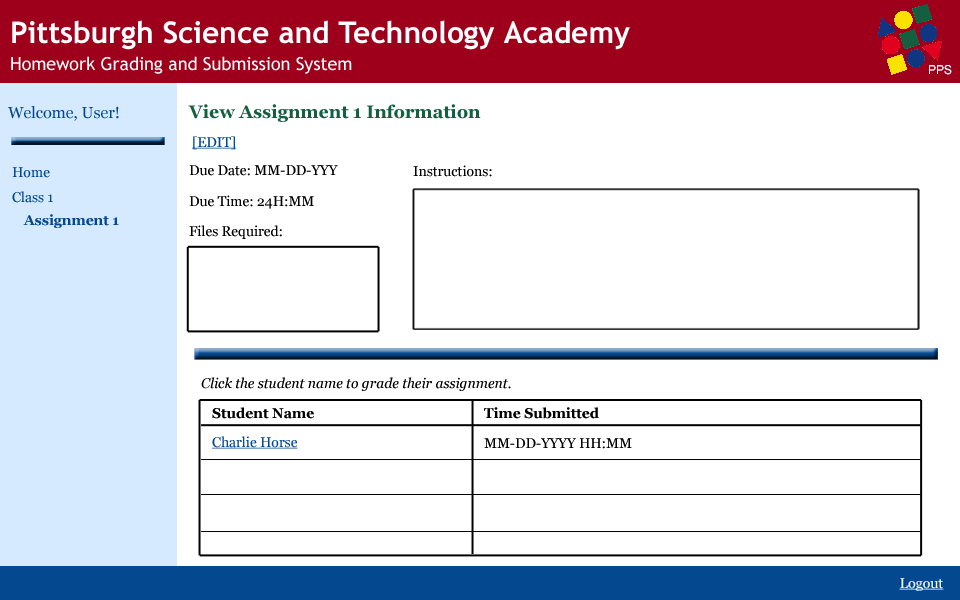
<style>
.page{position:relative;width:960px;height:600px;background:#ffffff}
.page>*{position:absolute;margin:0}
.t1{font:15.9px "Georgia";color:#044990}
.t2{font:17.9px "Georgia-Bold";color:#145f40}
.t3{font:13.9px "Georgia";color:#044990;text-decoration:underline}
.t4{font:13.9px "Georgia";color:#044990}
.t5{font:13.9px "Georgia";color:#000000}
.t6{font:13.9px "Georgia-Bold";color:#044990}
.t7{font:13.9px "Georgia-Italic";color:#000000}
.t8{font:13.9px "Georgia-Bold";color:#000000}
</style>
<div class="page">
<p class="t1" style="left:8px;top:106px;width:111px;height:15px">Welcome, User!</p>
<p class="t2" style="left:188px;top:104px;width:293px;height:18px">View Assignment 1 Information</p>
<p class="t3" style="left:192px;top:136px;width:45px;height:14px">[EDIT]</p>
<p class="t4" style="left:12px;top:167px;width:38px;height:11px">Home</p>
<p class="t5" style="left:189px;top:165px;width:149px;height:11px">Due Date: MM-DD-YYY</p>
<p class="t5" style="left:413px;top:165px;width:79px;height:12px">Instructions:</p>
<p class="t4" style="left:12px;top:191px;width:41px;height:12px">Class 1</p>
<p class="t5" style="left:189px;top:195px;width:125px;height:14px">Due Time: 24H:MM</p>
<p class="t6" style="left:23px;top:214px;width:96px;height:14px">Assignment 1</p>
<p class="t5" style="left:189px;top:225px;width:93px;height:14px">Files Required:</p>
<p class="t7" style="left:201px;top:377px;width:310px;height:14px">Click the student name to grade their assignment.</p>
<p class="t8" style="left:212px;top:407px;width:102px;height:12px">Student Name</p>
<p class="t8" style="left:484px;top:407px;width:115px;height:12px">Time Submitted</p>
<p class="t3" style="left:212px;top:436px;width:86px;height:13px">Charlie Horse</p>
<p class="t5" style="left:484px;top:438px;width:148px;height:11px">MM-DD-YYYY HH:MM</p>
</div>
